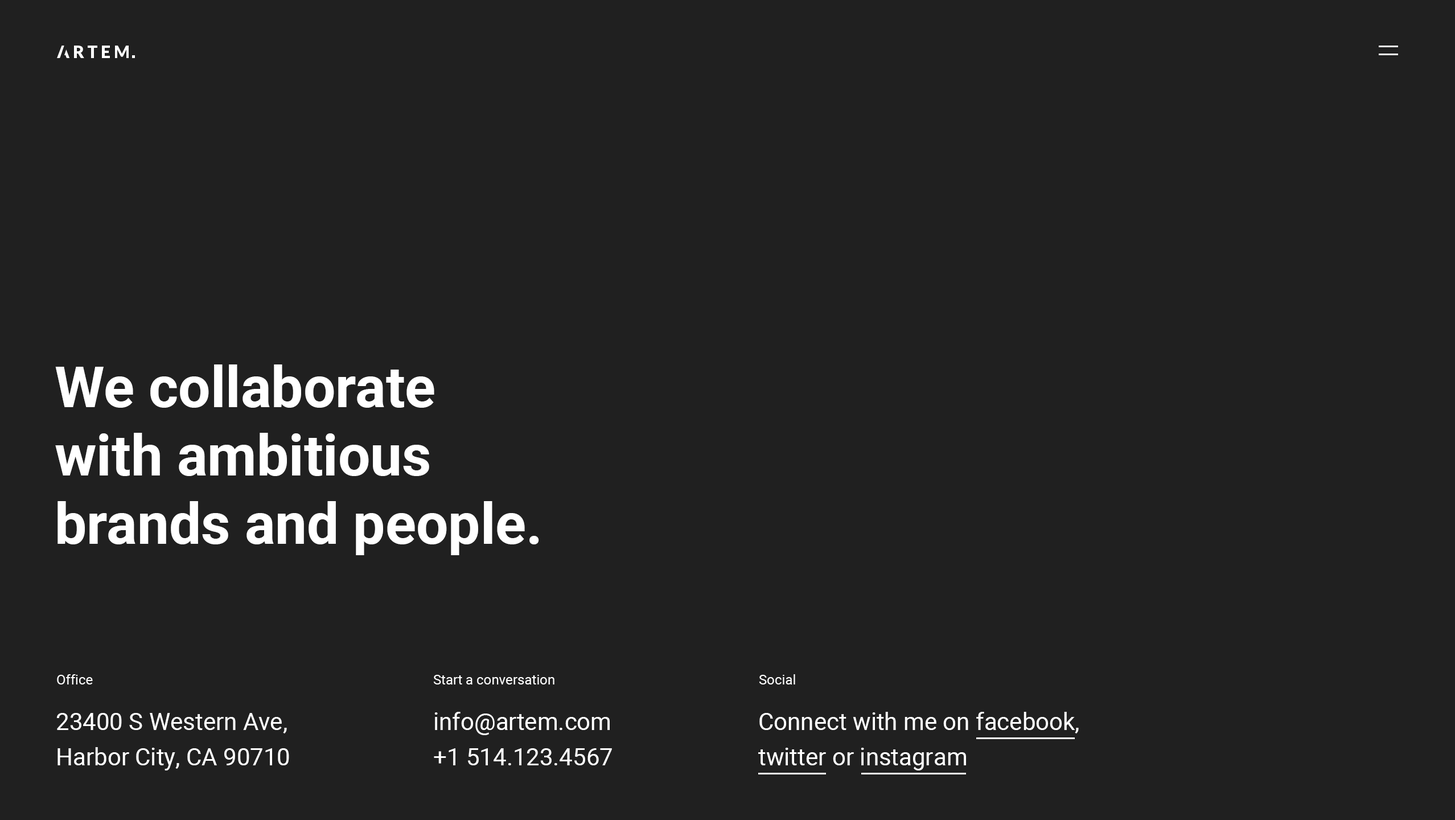
<style>
.page{position:relative;width:1455px;height:820px;background:#202020}
.page>*{position:absolute;margin:0}
.t1{font:56.9px/68.3px "Roboto-Bold";color:#ffffff}
.t2{font:13.7px "Roboto-Regular";color:#ffffff}
.t3{font:23.9px/35.3px "Roboto-Regular";color:#ffffff}
</style>
<div class="page">
<p class="t1" style="left:55px;top:364px;width:484px;height:191px">We collaborate <br>with ambitious <br>brands and people.</p>
<p class="t2" style="left:57px;top:674px;width:36px;height:10px">Office</p>
<p class="t2" style="left:433px;top:674px;width:121px;height:10px">Start a conversation</p>
<p class="t2" style="left:759px;top:674px;width:36px;height:10px">Social</p>
<p class="t3" style="left:56px;top:713px;width:233px;height:57px">23400 S Western Ave, <br>Harbor City, CA 90710</p>
<p class="t3" style="left:434px;top:711px;width:178px;height:54px">info@artem.com <br>+1 514.123.4567</p>
<p class="t3" style="left:758px;top:711px;width:321px;height:59px">Connect with me on facebook,<br>twitter or instagram</p>
</div>
